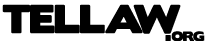
<style>
.page{position:relative;width:206px;height:41px;background:#ffffff}
.page>*{position:absolute;margin:0}
.t1{font:36px "BorisBlackBloxx";letter-spacing:-0.03em;color:#000000;text-transform:uppercase}
.t2{font:12px "BorisBlackBloxx";letter-spacing:-0.03em;color:#000000;text-transform:uppercase}
.t3{font:30px "BorisBlackBloxx";letter-spacing:-0.03em;color:#000000;text-transform:uppercase}
</style>
<div class="page">
<p class="t1" style="left:2px;top:4px;width:179px;height:30px">Tellaw</p>
<p class="t2" style="left:165px;top:31px;width:40px;height:11px"><span class="t3">.</span>org</p>
</div>
